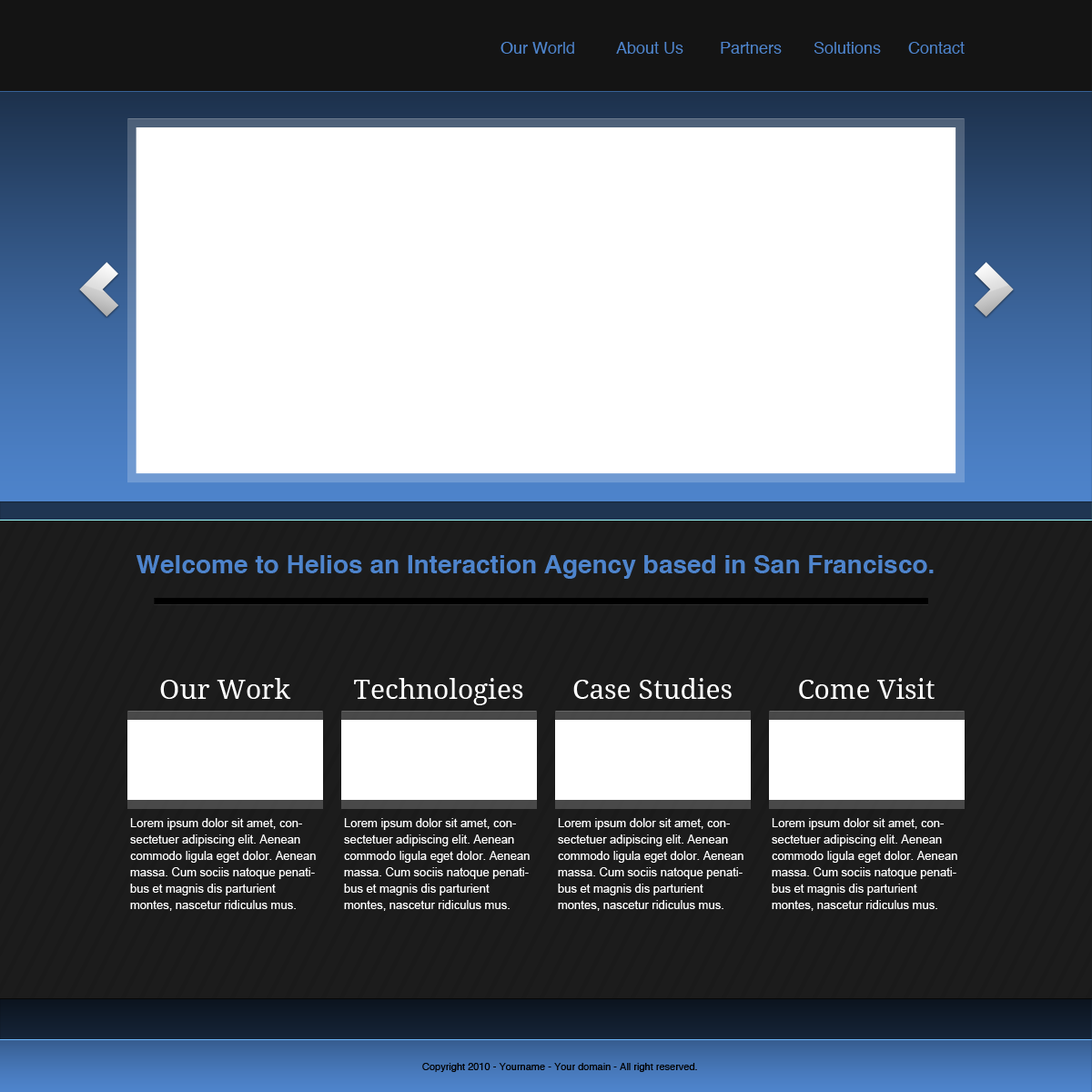
<style>
.page{position:relative;width:1092px;height:1092px;background:#ffffff}
.page>*{position:absolute;margin:0}
.t1{font:16.4px "Helvetica";color:#4e84cc}
.t2{font:25.5px "Helvetica-Bold";color:#4e84cc}
.t3{font:27.3px "DroidSerif";color:#ffffff}
.t4{font:11.8px/16.4px "ArialMT";color:#ffffff}
.t5{font:10px "Helvetica";color:#010101}
</style>
<div class="page">
<p class="t1" style="left:500px;top:42px;width:465px;height:12px">Our World         About Us      Partners       Solutions      Contact</p>
<p class="t2" style="left:136px;top:555px;width:798px;height:24px">Welcome to Helios an Interaction Agency based in San Francisco.</p>
<p class="t3" style="left:160px;top:678px;width:131px;height:21px">Our Work</p>
<p class="t3" style="left:354px;top:678px;width:169px;height:27px">Technologies</p>
<p class="t3" style="left:573px;top:678px;width:159px;height:21px">Case Studies</p>
<p class="t3" style="left:799px;top:678px;width:136px;height:21px">Come Visit</p>
<p class="t4" style="left:130px;top:818px;width:186px;height:93px">Lorem ipsum dolor sit amet, consectetuer adipiscing elit. Aenean commodo ligula eget dolor. Aenean massa. Cum sociis natoque penatibus et magnis dis parturient montes, nascetur ridiculus mus.</p>
<p class="t4" style="left:344px;top:818px;width:186px;height:93px">Lorem ipsum dolor sit amet, consectetuer adipiscing elit. Aenean commodo ligula eget dolor. Aenean massa. Cum sociis natoque penatibus et magnis dis parturient montes, nascetur ridiculus mus.</p>
<p class="t4" style="left:558px;top:818px;width:185px;height:93px">Lorem ipsum dolor sit amet, consectetuer adipiscing elit. Aenean commodo ligula eget dolor. Aenean massa. Cum sociis natoque penatibus et magnis dis parturient montes, nascetur ridiculus mus.</p>
<p class="t4" style="left:772px;top:818px;width:185px;height:93px">Lorem ipsum dolor sit amet, consectetuer adipiscing elit. Aenean commodo ligula eget dolor. Aenean massa. Cum sociis natoque penatibus et magnis dis parturient montes, nascetur ridiculus mus.</p>
<p class="t5" style="left:422px;top:1063px;width:275px;height:9px">Copyright 2010 - Yourname - Your domain - All right reserved.</p>
</div>
